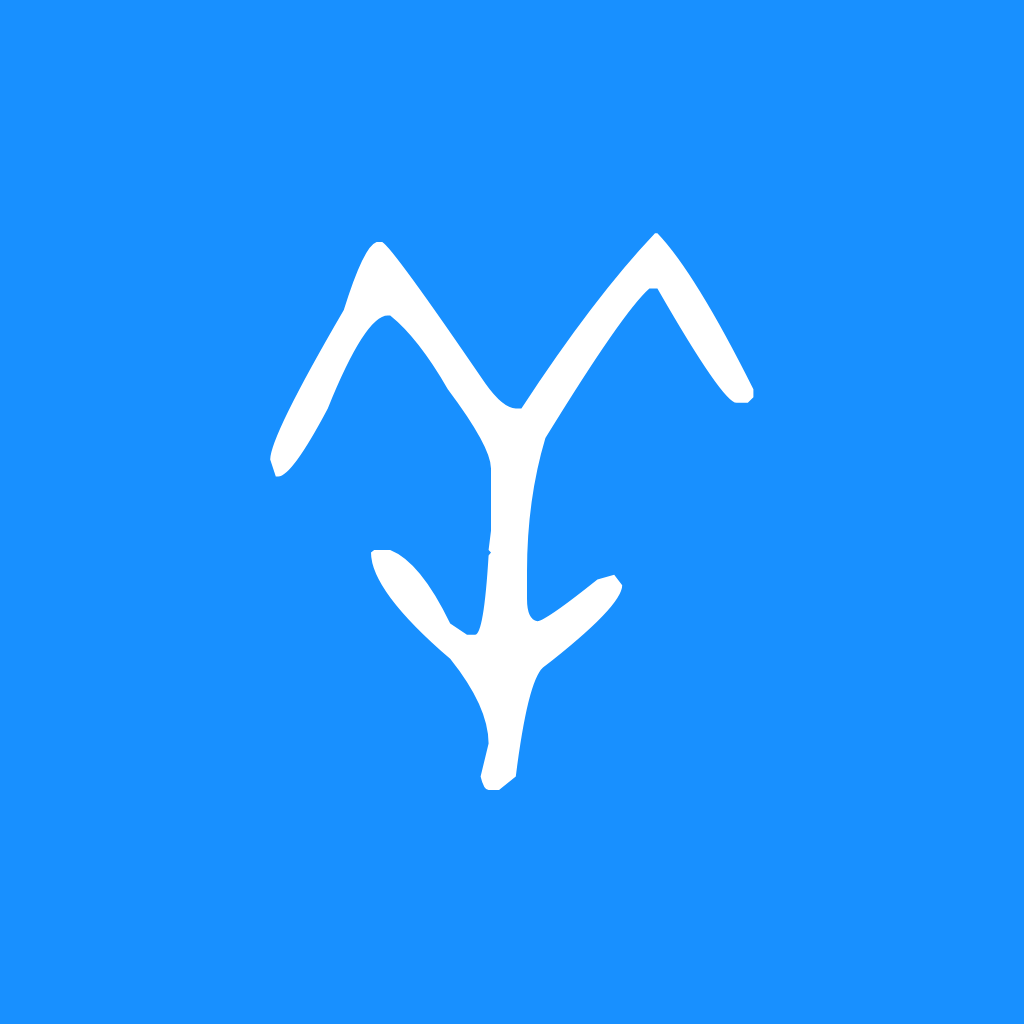
<style>
.page{position:relative;width:1024px;height:1024px;background:#1890ff}
.page>*{position:absolute;margin:0}
.t1{font:800px "jiaguwenziti";color:#ffffff}
</style>
<div class="page">
<p class="t1" style="left:270px;top:233px;width:484px;height:557px">羊</p>
</div>
